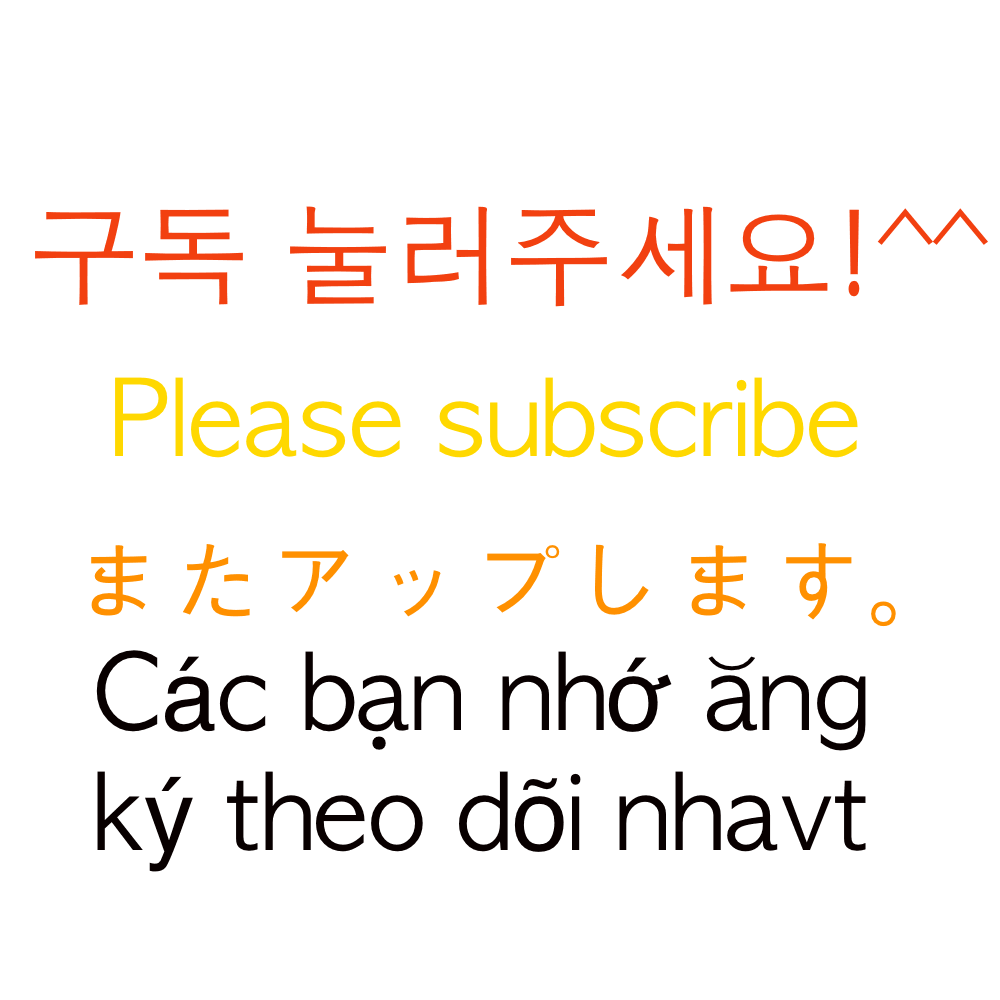
<style>
.page{position:relative;width:1000px;height:1000px;background:#ffffff}
.page>*{position:absolute;margin:0}
.t1{font:110px "AppleGothic";color:#f24010}
.t2{font:100px "AppleGothic";color:#ffd800}
.t3{font:100px "AppleGothic";color:#ff9000}
.t4{font:100px "AppleGothic";color:#080000}
.t5{font:100px "Helvetica";color:#080000}
</style>
<div class="page">
<p class="t1" style="left:35px;top:206px;width:953px;height:101px">구독 눌러주세요!^^</p>
<p class="t2" style="left:115px;top:377px;width:743px;height:81px">Please subscribe</p>
<p class="t3" style="left:91px;top:543px;width:805px;height:84px">またアップします。</p>
<p class="t4" style="left:96px;top:650px;width:770px;height:222px">C<span class="t5">á</span>c bạn nh<span class="t5">ớ</span> ăng <br>k<span class="t5">ý</span> theo d<span class="t5">õ</span>i nhavt</p>
</div>
